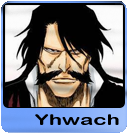
<style>
.page{position:relative;width:128px;height:135px}
.page>*{position:absolute;margin:0}
.t1{font:15px "ArialRoundedMTBold";color:#000000;scale:1.48 1}
</style>
<div class="page">
<p class="t1" style="left:35px;top:114px;width:84px;height:11px">Yhwach</p>
</div>
